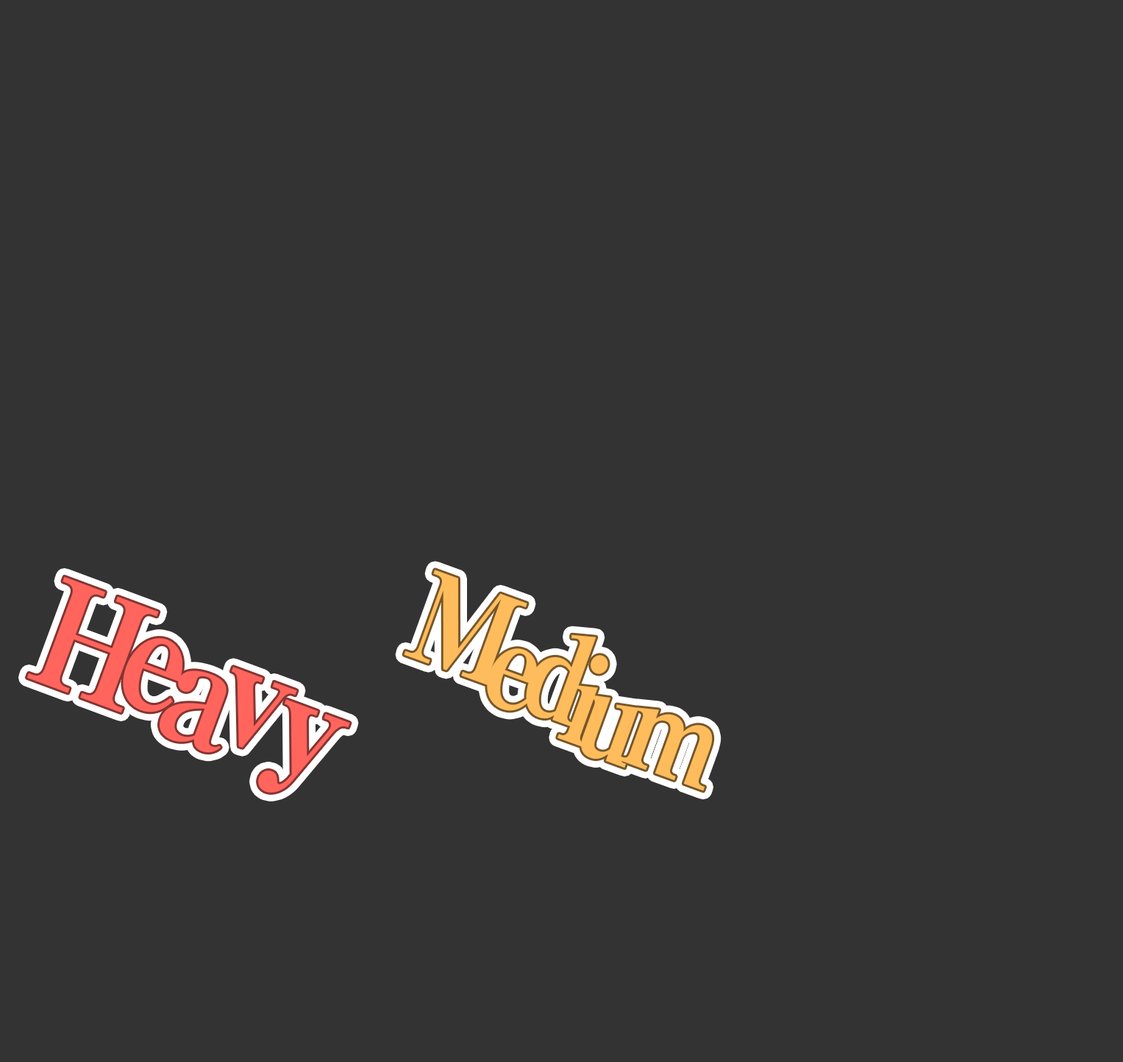
<style>
.page{position:relative;width:1123px;height:1062px;background:#333333}
.page>*{position:absolute;margin:0}
.t1{font:123.6px "RyuminPro-ExBold";letter-spacing:-0.14em;color:#ffbc5c;scale:0.9 1}
.t2{font:147.1px "RyuminPro-ExBold";letter-spacing:-0.12em;color:#ff655d;scale:0.9 1}
</style>
<div class="page">
<p class="t1" style="left:404px;top:569px;width:309px;height:222px;rotate:20deg">Medium</p>
<p class="t2" style="left:26px;top:576px;width:324px;height:216px;rotate:20deg">Heavy</p>
</div>
